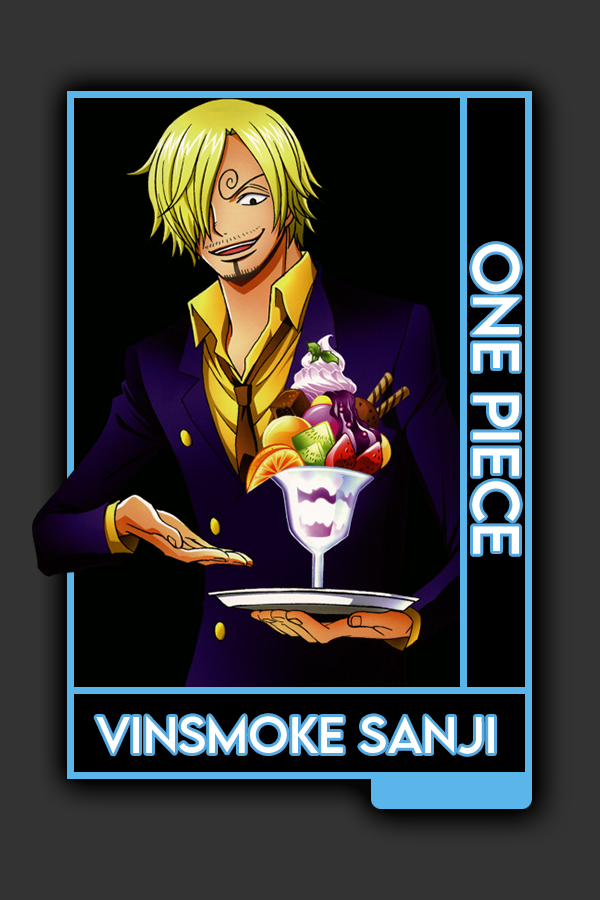
<style>
.page{position:relative;width:600px;height:900px;background:#333333}
.page>*{position:absolute;margin:0}
.t1{font:58.4px "LEMONMILK-Regular";color:#ffffff}
.t2{font:45.6px "LEMONMILK-Regular";color:#ffffff}
</style>
<div class="page">
<p class="t1" style="left:472px;top:244px;width:48px;height:310px;rotate:90deg">One Piece</p>
<p class="t2" style="left:96px;top:716px;width:398px;height:38px">Vinsmoke Sanji</p>
</div>
